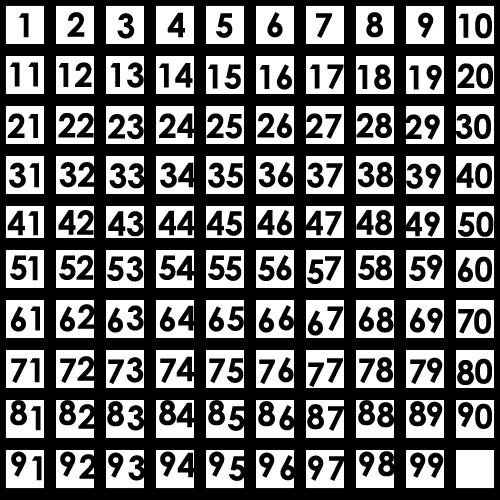
<style>
.page{position:relative;width:500px;height:500px;background:#000000}
.page>*{position:absolute;margin:0}
.t1{font:33px "CenturyGothic-Bold";color:#000000}
</style>
<div class="page">
<p class="t1" style="left:19px;top:13px;width:10px;height:25px">1</p>
<p class="t1" style="left:67px;top:12px;width:18px;height:25px">2</p>
<p class="t1" style="left:117px;top:13px;width:18px;height:26px">3</p>
<p class="t1" style="left:167px;top:12px;width:18px;height:26px">4</p>
<p class="t1" style="left:216px;top:13px;width:17px;height:25px">5</p>
<p class="t1" style="left:267px;top:12px;width:16px;height:26px">6</p>
<p class="t1" style="left:316px;top:13px;width:16px;height:25px">7</p>
<p class="t1" style="left:366px;top:12px;width:17px;height:26px">8</p>
<p class="t1" style="left:418px;top:12px;width:16px;height:26px">9</p>
<p class="t1" style="left:458px;top:13px;width:34px;height:26px">10</p>
<p class="t1" style="left:10px;top:62px;width:28px;height:25px">11</p>
<p class="t1" style="left:58px;top:62px;width:34px;height:25px">12</p>
<p class="t1" style="left:110px;top:62px;width:34px;height:26px">13</p>
<p class="t1" style="left:159px;top:63px;width:34px;height:25px">14</p>
<p class="t1" style="left:208px;top:64px;width:33px;height:25px">15</p>
<p class="t1" style="left:259px;top:64px;width:33px;height:26px">16</p>
<p class="t1" style="left:310px;top:64px;width:34px;height:25px">17</p>
<p class="t1" style="left:357px;top:64px;width:34px;height:26px">18</p>
<p class="t1" style="left:409px;top:65px;width:33px;height:25px">19</p>
<p class="t1" style="left:457px;top:63px;width:36px;height:26px">20</p>
<p class="t1" style="left:7px;top:113px;width:31px;height:25px">21</p>
<p class="t1" style="left:58px;top:113px;width:36px;height:25px">22</p>
<p class="t1" style="left:159px;top:113px;width:36px;height:25px">24</p>
<p class="t1" style="left:206px;top:113px;width:36px;height:26px">25</p>
<p class="t1" style="left:257px;top:113px;width:35px;height:25px">26</p>
<p class="t1" style="left:305px;top:113px;width:37px;height:26px">27</p>
<p class="t1" style="left:356px;top:113px;width:36px;height:25px">28</p>
<p class="t1" style="left:108px;top:114px;width:36px;height:26px">23</p>
<p class="t1" style="left:404px;top:114px;width:36px;height:26px">29</p>
<p class="t1" style="left:455px;top:114px;width:36px;height:25px">30</p>
<p class="t1" style="left:9px;top:162px;width:30px;height:26px">31</p>
<p class="t1" style="left:59px;top:162px;width:36px;height:26px">32</p>
<p class="t1" style="left:109px;top:163px;width:36px;height:26px">33</p>
<p class="t1" style="left:160px;top:162px;width:36px;height:26px">34</p>
<p class="t1" style="left:208px;top:162px;width:35px;height:26px">35</p>
<p class="t1" style="left:258px;top:162px;width:35px;height:26px">36</p>
<p class="t1" style="left:307px;top:162px;width:36px;height:26px">37</p>
<p class="t1" style="left:357px;top:162px;width:36px;height:26px">38</p>
<p class="t1" style="left:406px;top:163px;width:35px;height:26px">39</p>
<p class="t1" style="left:456px;top:163px;width:36px;height:26px">40</p>
<p class="t1" style="left:7px;top:210px;width:31px;height:26px">41</p>
<p class="t1" style="left:58px;top:210px;width:36px;height:25px">42</p>
<p class="t1" style="left:108px;top:211px;width:36px;height:26px">43</p>
<p class="t1" style="left:158px;top:210px;width:37px;height:26px">44</p>
<p class="t1" style="left:206px;top:210px;width:36px;height:26px">45</p>
<p class="t1" style="left:257px;top:210px;width:35px;height:26px">46</p>
<p class="t1" style="left:305px;top:210px;width:37px;height:26px">47</p>
<p class="t1" style="left:356px;top:210px;width:36px;height:26px">48</p>
<p class="t1" style="left:404px;top:211px;width:36px;height:26px">49</p>
<p class="t1" style="left:457px;top:211px;width:37px;height:26px">50</p>
<p class="t1" style="left:10px;top:255px;width:17px;height:222px">5  6  7 8  9</p>
<p class="t1" style="left:28px;top:256px;width:10px;height:25px">1</p>
<p class="t1" style="left:59px;top:255px;width:17px;height:222px">5  6  7 8  9</p>
<p class="t1" style="left:76px;top:255px;width:18px;height:25px">2</p>
<p class="t1" style="left:107px;top:256px;width:17px;height:222px">5  6  7 8  9</p>
<p class="t1" style="left:126px;top:256px;width:18px;height:26px">3</p>
<p class="t1" style="left:159px;top:255px;width:17px;height:222px">5  6  7 8  9</p>
<p class="t1" style="left:176px;top:255px;width:18px;height:26px">4</p>
<p class="t1" style="left:208px;top:255px;width:17px;height:222px">5  6  7 8  9</p>
<p class="t1" style="left:225px;top:256px;width:17px;height:25px">5</p>
<p class="t1" style="left:258px;top:256px;width:17px;height:222px">5  6  7 8  9</p>
<p class="t1" style="left:276px;top:255px;width:16px;height:26px">6</p>
<p class="t1" style="left:325px;top:256px;width:16px;height:25px">7</p>
<p class="t1" style="left:358px;top:255px;width:17px;height:222px">5  6  7 8  9</p>
<p class="t1" style="left:375px;top:255px;width:17px;height:26px">8</p>
<p class="t1" style="left:409px;top:256px;width:17px;height:222px">5  6  7 8  9</p>
<p class="t1" style="left:427px;top:254px;width:16px;height:26px">9</p>
<p class="t1" style="left:457px;top:257px;width:17px;height:171px">6  7  8 9</p>
<p class="t1" style="left:475px;top:256px;width:17px;height:26px">0</p>
<p class="t1" style="left:307px;top:259px;width:17px;height:222px">5  6  7 8  9</p>
<p class="t1" style="left:77px;top:304px;width:18px;height:25px">2</p>
<p class="t1" style="left:127px;top:305px;width:17px;height:26px">3</p>
<p class="t1" style="left:178px;top:305px;width:18px;height:26px">4</p>
<p class="t1" style="left:278px;top:305px;width:16px;height:26px">6</p>
<p class="t1" style="left:30px;top:306px;width:10px;height:25px">1</p>
<p class="t1" style="left:227px;top:306px;width:17px;height:25px">5</p>
<p class="t1" style="left:327px;top:306px;width:17px;height:25px">7</p>
<p class="t1" style="left:376px;top:307px;width:18px;height:26px">8</p>
<p class="t1" style="left:427px;top:307px;width:16px;height:26px">9</p>
<p class="t1" style="left:474px;top:308px;width:17px;height:26px">0</p>
<p class="t1" style="left:30px;top:358px;width:10px;height:25px">1</p>
<p class="t1" style="left:77px;top:356px;width:18px;height:25px">2</p>
<p class="t1" style="left:126px;top:357px;width:18px;height:26px">3</p>
<p class="t1" style="left:176px;top:356px;width:18px;height:26px">4</p>
<p class="t1" style="left:227px;top:358px;width:17px;height:25px">5</p>
<p class="t1" style="left:278px;top:357px;width:16px;height:26px">6</p>
<p class="t1" style="left:327px;top:358px;width:16px;height:25px">7</p>
<p class="t1" style="left:376px;top:357px;width:17px;height:26px">8</p>
<p class="t1" style="left:427px;top:357px;width:16px;height:26px">9</p>
<p class="t1" style="left:475px;top:358px;width:17px;height:26px">0</p>
<p class="t1" style="left:427px;top:401px;width:16px;height:26px">9</p>
<p class="t1" style="left:31px;top:406px;width:10px;height:25px">1</p>
<p class="t1" style="left:78px;top:404px;width:18px;height:25px">2</p>
<p class="t1" style="left:127px;top:405px;width:18px;height:26px">3</p>
<p class="t1" style="left:176px;top:402px;width:18px;height:26px">4</p>
<p class="t1" style="left:228px;top:406px;width:17px;height:25px">5</p>
<p class="t1" style="left:279px;top:405px;width:16px;height:26px">6</p>
<p class="t1" style="left:328px;top:406px;width:16px;height:25px">7</p>
<p class="t1" style="left:377px;top:402px;width:17px;height:26px">8</p>
<p class="t1" style="left:475px;top:403px;width:17px;height:26px">0</p>
<p class="t1" style="left:32px;top:456px;width:10px;height:25px">1</p>
<p class="t1" style="left:79px;top:454px;width:18px;height:25px">2</p>
<p class="t1" style="left:128px;top:455px;width:18px;height:26px">3</p>
<p class="t1" style="left:177px;top:452px;width:18px;height:26px">4</p>
<p class="t1" style="left:229px;top:456px;width:17px;height:25px">5</p>
<p class="t1" style="left:280px;top:455px;width:16px;height:26px">6</p>
<p class="t1" style="left:329px;top:456px;width:16px;height:25px">7</p>
<p class="t1" style="left:378px;top:451px;width:17px;height:26px">8</p>
<p class="t1" style="left:428px;top:452px;width:16px;height:26px">9</p>
</div>
